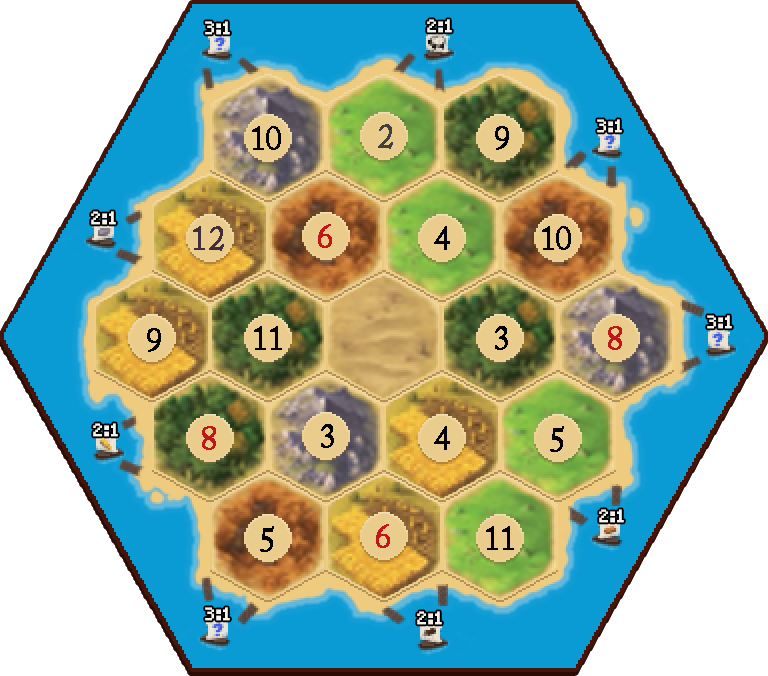
<style>
.page{position:relative;width:768px;height:676px;background:#ffffff}
.page>*{position:absolute;margin:0}
.t1{font:16.7px "Small-Pixel";color:#f6f3ee;font-weight:bold}
.t2{font:33.3px "ACaslonPro-Regular";letter-spacing:-0.075em;color:#000000;font-weight:bold}
.t3{font:33.3px "ACaslonPro-Regular";letter-spacing:-0.075em;color:#404040;font-weight:bold}
.t4{font:33.3px "ACaslonPro-Regular";color:#402e40;font-weight:bold}
.t5{font:33.3px "ACaslonPro-Regular";letter-spacing:-0.075em;color:#c11717;font-weight:bold}
</style>
<div class="page">
<p class="t1" style="left:205px;top:21px;width:25px;height:14px">3:1</p>
<p class="t1" style="left:427px;top:19px;width:25px;height:14px">2:1</p>
<p class="t2" style="left:252px;top:126px;width:29px;height:24px">10</p>
<p class="t3" style="left:378px;top:124px;width:15px;height:25px">2</p>
<p class="t2" style="left:495px;top:126px;width:14px;height:24px">9</p>
<p class="t1" style="left:597px;top:119px;width:25px;height:14px">3:1</p>
<p class="t1" style="left:91px;top:211px;width:25px;height:14px">2:1</p>
<p class="t4" style="left:193px;top:226px;width:31px;height:25px">12</p>
<p class="t5" style="left:318px;top:224px;width:14px;height:24px">6</p>
<p class="t2" style="left:434px;top:226px;width:16px;height:24px">4</p>
<p class="t2" style="left:542px;top:226px;width:29px;height:24px">10</p>
<p class="t1" style="left:707px;top:315px;width:25px;height:14px">3:1</p>
<p class="t2" style="left:147px;top:328px;width:14px;height:24px">9</p>
<p class="t2" style="left:254px;top:326px;width:28px;height:24px">11</p>
<p class="t2" style="left:495px;top:326px;width:13px;height:24px">3</p>
<p class="t5" style="left:608px;top:326px;width:14px;height:24px">8</p>
<p class="t1" style="left:93px;top:423px;width:25px;height:14px">2:1</p>
<p class="t2" style="left:321px;top:424px;width:13px;height:24px">3</p>
<p class="t5" style="left:202px;top:426px;width:14px;height:24px">8</p>
<p class="t2" style="left:434px;top:426px;width:16px;height:24px">4</p>
<p class="t2" style="left:550px;top:426px;width:14px;height:26px">5</p>
<p class="t1" style="left:599px;top:509px;width:25px;height:14px">2:1</p>
<p class="t2" style="left:260px;top:526px;width:14px;height:26px">5</p>
<p class="t5" style="left:376px;top:524px;width:14px;height:24px">6</p>
<p class="t2" style="left:486px;top:526px;width:28px;height:24px">11</p>
<p class="t1" style="left:205px;top:607px;width:25px;height:14px">3:1</p>
<p class="t1" style="left:417px;top:611px;width:25px;height:14px">2:1</p>
</div>
